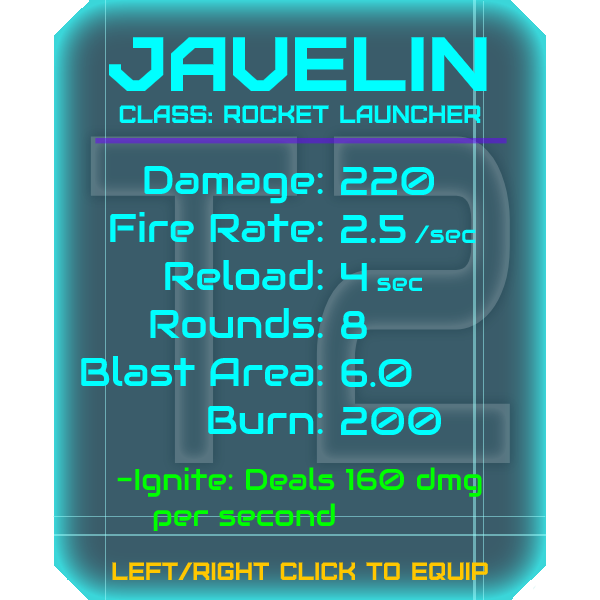
<style>
.page{position:relative;width:600px;height:600px;background:#3a5c6a}
.page>*{position:absolute;margin:0}
.t1{font:76.8px "Furore";color:#00ffff;scale:1.13 1}
.t2{font:25px "Furore";color:#00ffff}
.t3{font:40px "Audiowide-Regular";color:#00ffff}
.t4{font:25px "Audiowide-Regular";color:#00ffff}
.t5{font:30px "Audiowide-Regular";color:#00ff00}
.t6{font:40px "Audiowide-Regular";color:#00ff00}
.t7{font:25px "Furore";color:#ffc700}
</style>
<div class="page">
<p class="t1" style="left:108px;top:37px;width:379px;height:54px">Javelin</p>
<p class="t2" style="left:119px;top:105px;width:362px;height:18px">Class: rocket launcher</p>
<p class="t3" style="left:81px;top:165px;width:242px;height:269px;text-align:right">Damage:<br>Fire Rate:<br>Reload:<br>Rounds:<br>Blast Area:<br>Burn:</p>
<p class="t3" style="left:341px;top:166px;width:135px;height:269px">220<br>2.5 <span class="t4">/sec<br></span>4 <span class="t4">sec<br></span>8<br>6.0<br>200</p>
<p class="t5" style="left:117px;top:467px;width:365px;height:64px"><span class="t6"><br><br><br><br><br><br></span>-Ignite: Deals 160 dmg<br> per second</p>
<p class="t7" style="left:112px;top:562px;width:376px;height:18px">left/right click to equip</p>
</div>
